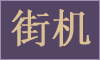
<style>
.page{position:relative;width:100px;height:60px;background:#554565}
.page>*{position:absolute;margin:0}
.t1{font:40px "SimSun";color:#dbc093;font-weight:bold}
</style>
<div class="page">
<p class="t1" style="left:11px;top:9px;width:80px;height:38px">街机</p>
</div>
